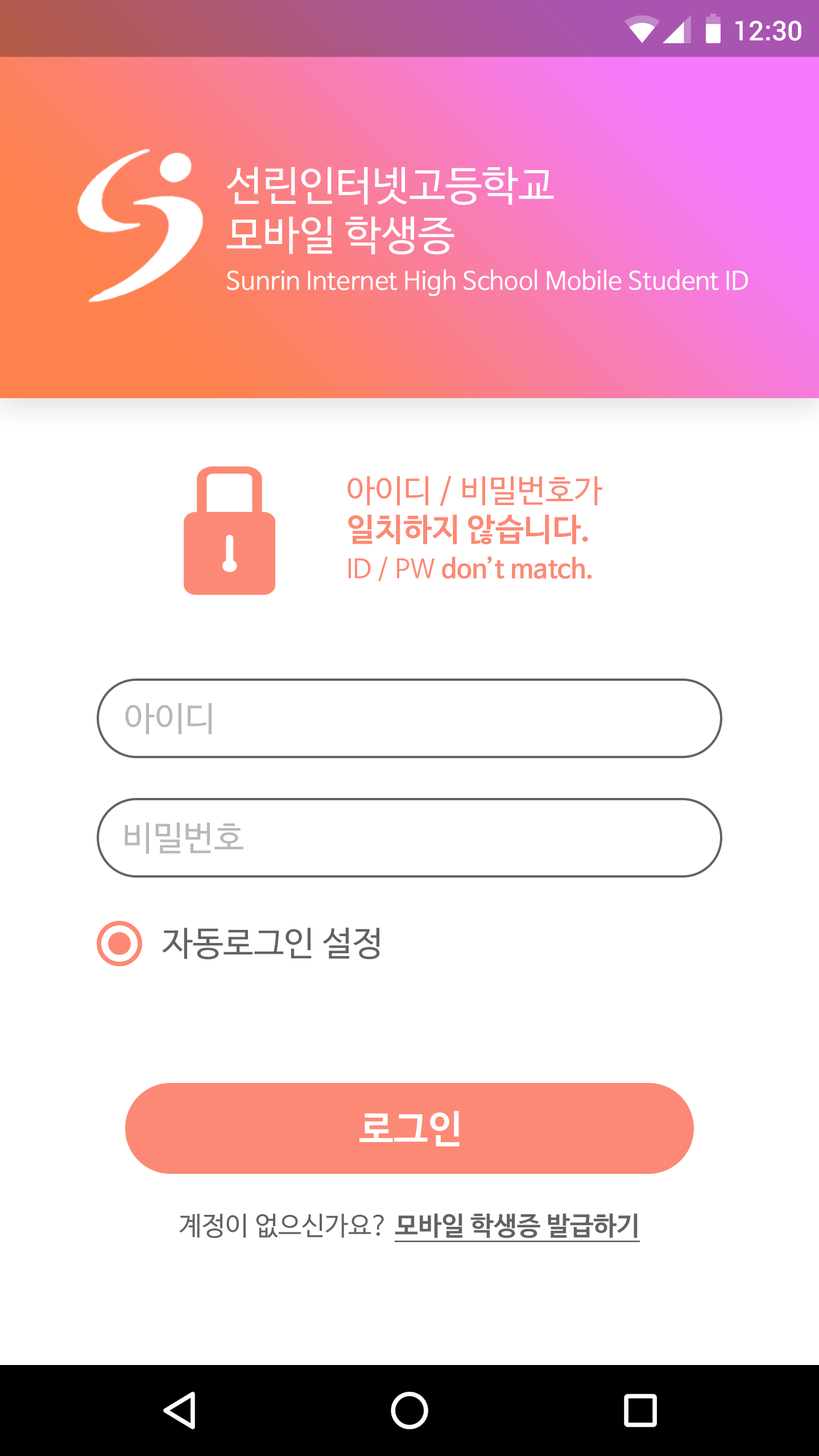
<style>
.page{position:relative;width:819px;height:1456px;background:#ffffff}
.page>*{position:absolute;margin:0}
.t1{font:27.3px "Roboto-Medium";color:#ffffff}
.t2{font:40.9px "NanumBarunGothic";color:#ffffff}
.t3{font:25px "NanumBarunGothic";color:#ffffff}
.t4{font:31.8px "NanumBarunGothic";color:#fc8975}
.t5{font:31.8px "NanumBarunGothicBold";color:#fc8975}
.t6{font:26.2px "NanumBarunGothicBold";color:#fc8975}
.t7{font:26.2px "NanumBarunGothic";color:#fc8975}
.t8{font:34.1px "NanumBarunGothic";color:#b8b8b8}
.t9{font:34.1px "NanumBarunGothic";color:#626262}
.t10{font:38.7px "NanumBarunGothicBold";color:#ffffff}
.t11{font:26.2px "NanumBarunGothicBold";color:#626262;text-decoration:underline}
.t12{font:26.2px "NanumBarunGothic";color:#626262}
</style>
<div class="page">
<p class="t1" style="left:735px;top:20px;width:66px;height:21px">12:30</p>
<p class="t2" style="left:226px;top:167px;width:328px;height:88px">선린인터넷고등학교<br>모바일 학생증</p>
<p class="t3" style="left:227px;top:269px;width:521px;height:27px">Sunrin Internet High School Mobile Student ID</p>
<p class="t4" style="left:348px;top:476px;width:254px;height:68px">아이디 / 비밀번호가<br><span class="t5">일치하지 않습니다.</span></p>
<p class="t6" style="left:349px;top:556px;width:243px;height:25px"><span class="t7">ID / PW </span>don’t match.</p>
<p class="t8" style="left:125px;top:703px;width:87px;height:31px">아이디</p>
<p class="t8" style="left:125px;top:822px;width:118px;height:32px">비밀번호</p>
<p class="t9" style="left:162px;top:928px;width:218px;height:31px">자동로그인 설정</p>
<p class="t10" style="left:359px;top:1111px;width:101px;height:36px">로그인</p>
<p class="t11" style="left:179px;top:1213px;width:461px;height:29px"><span class="t12">계정이 없으신가요? </span>모바일 학생증 발급하기</p>
</div>
